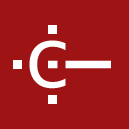
<style>
.page{position:relative;width:129px;height:129px;background:#9e1414}
.page>*{position:absolute;margin:0}
.t1{font:83px "BitstreamVeraSans-Roman";color:#ffffff}
</style>
<div class="page">
<p class="t1" style="left:29px;top:40px;width:37px;height:49px">c</p>
<p class="t1" style="left:48px;top:60px;width:63px;height:9px;rotate:-90deg">i</p>
</div>
